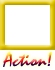
<style>
.page{position:relative;width:55px;height:70px;background:#ffffff}
.page>*{position:absolute;margin:0}
.t1{font:20px "Mistral"}
</style>
<div class="page">
<p class="t1" style="left:3px;top:51px;width:49px;height:16px">Action!</p>
</div>
